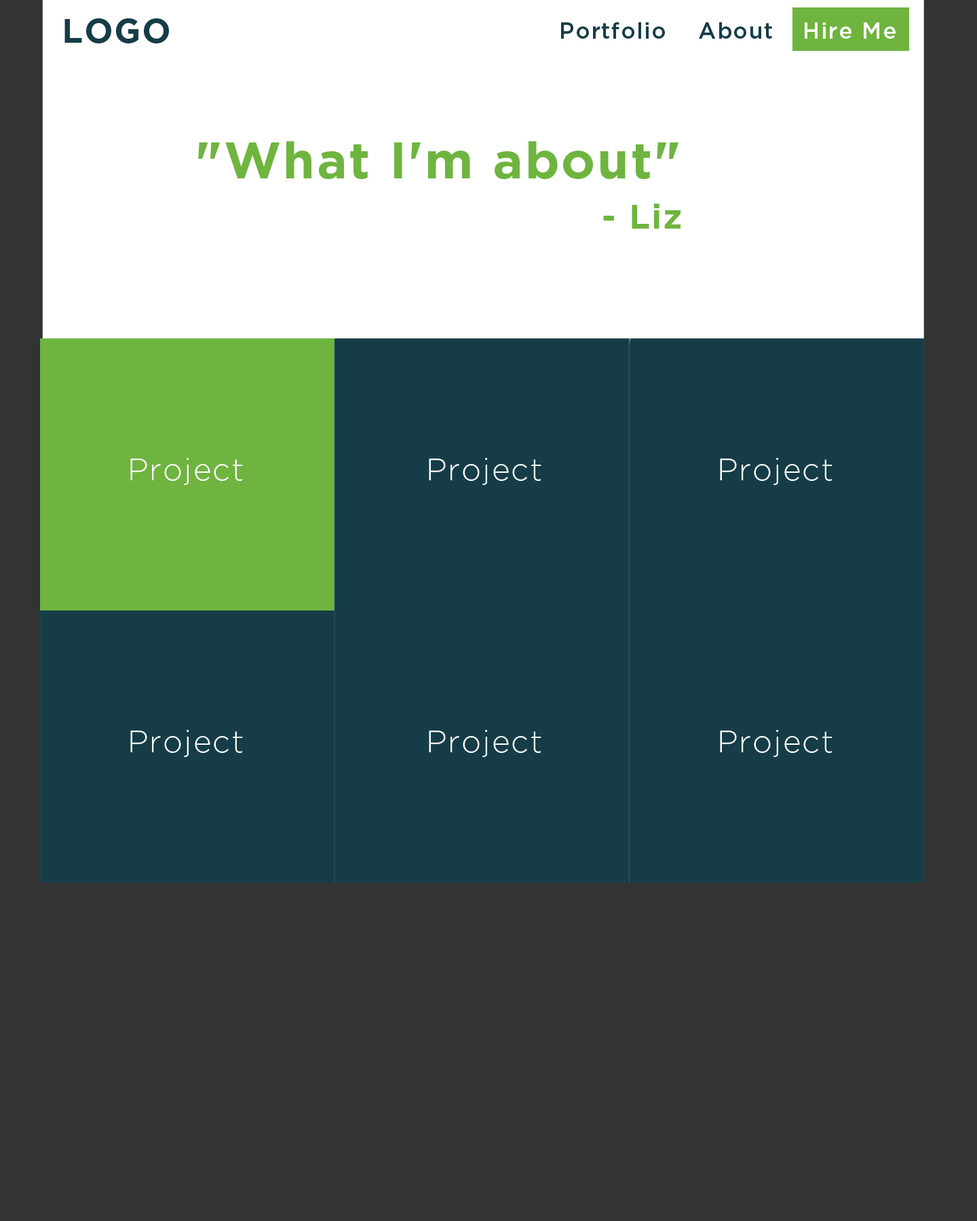
<style>
.page{position:relative;width:977px;height:1221px;background:#333333}
.page>*{position:absolute;margin:0}
.t1{font:33.9px "Gotham-Bold";letter-spacing:0.04em;color:#163d47;text-transform:uppercase}
.t2{font:22.6px "Gotham-Medium";letter-spacing:0.04em;color:#163d47}
.t3{font:22.6px "Gotham-Medium";letter-spacing:0.04em;color:#ffffff}
.t4{font:50.9px "Gotham-Bold";letter-spacing:0.04em;color:#6eb53f}
.t5{font:33.9px "Gotham-Bold";letter-spacing:0.04em;color:#6eb53f}
.t6{font:31.1px "Gotham-Light";letter-spacing:0.04em;color:#ffffff}
</style>
<div class="page">
<p class="t1" style="left:64px;top:18px;width:105px;height:25px">logo</p>
<p class="t2" style="left:561px;top:22px;width:104px;height:17px">Portfolio</p>
<p class="t2" style="left:699px;top:22px;width:73px;height:17px">About</p>
<p class="t3" style="left:804px;top:22px;width:91px;height:17px">Hire Me</p>
<p class="t4" style="left:198px;top:141px;width:480px;height:38px">"What I'm about"</p>
<p class="t5" style="left:603px;top:203px;width:77px;height:26px">- Liz</p>
<p class="t6" style="left:130px;top:458px;width:113px;height:27px">Project</p>
<p class="t6" style="left:429px;top:458px;width:112px;height:27px">Project</p>
<p class="t6" style="left:720px;top:458px;width:112px;height:27px">Project</p>
<p class="t6" style="left:130px;top:730px;width:113px;height:27px">Project</p>
<p class="t6" style="left:429px;top:730px;width:112px;height:27px">Project</p>
<p class="t6" style="left:720px;top:730px;width:112px;height:27px">Project</p>
</div>
